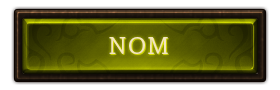
<style>
.page{position:relative;width:280px;height:90px;background:#ffffff}
.page>*{position:absolute;margin:0}
.t1{font:25px "ChaparralPro-Regular";letter-spacing:0.05em;color:#f4e5bf;text-transform:uppercase}
</style>
<div class="page">
<p class="t1" style="left:109px;top:37px;width:59px;height:17px">Nom</p>
</div>
